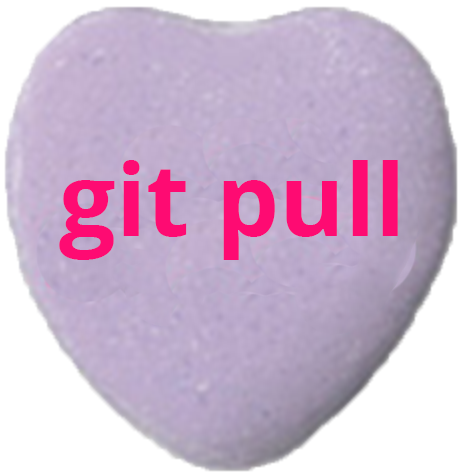
<style>
.page{position:relative;width:458px;height:472px;background:#ffffff}
.page>*{position:absolute;margin:0}
.t1{font:100px "OpenSans-Bold";color:#fe0b72}
</style>
<div class="page">
<p class="t1" style="left:59px;top:160px;width:339px;height:100px">git pull</p>
</div>
